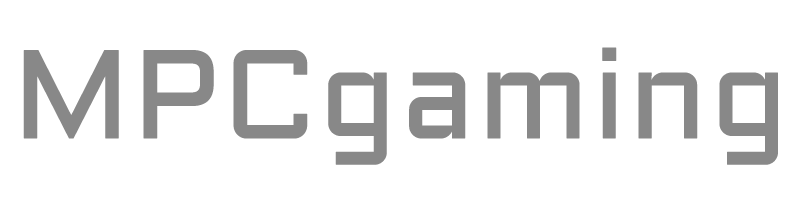
<style>
.page{position:relative;width:800px;height:200px;background:#ffffff}
.page>*{position:absolute;margin:0}
.t1{font:125px "Aldrich";color:#888888;font-weight:bold}
</style>
<div class="page">
<p class="t1" style="left:23px;top:47px;width:755px;height:118px">MPCgaming</p>
</div>
